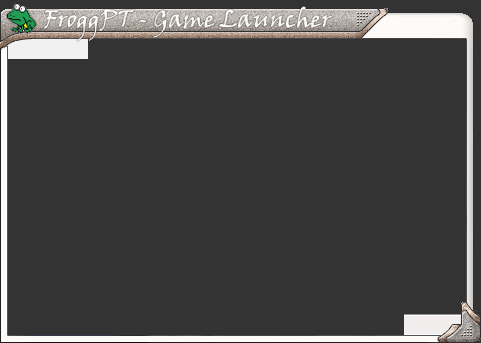
<style>
.page{position:relative;width:481px;height:343px;background:#333333}
.page>*{position:absolute;margin:0}
.t1{font:24px "VinerHandITC";color:#f1f1f1}
</style>
<div class="page">
<p class="t1" style="left:44px;top:6px;width:288px;height:35px">FroggPT - Game Launcher</p>
</div>
